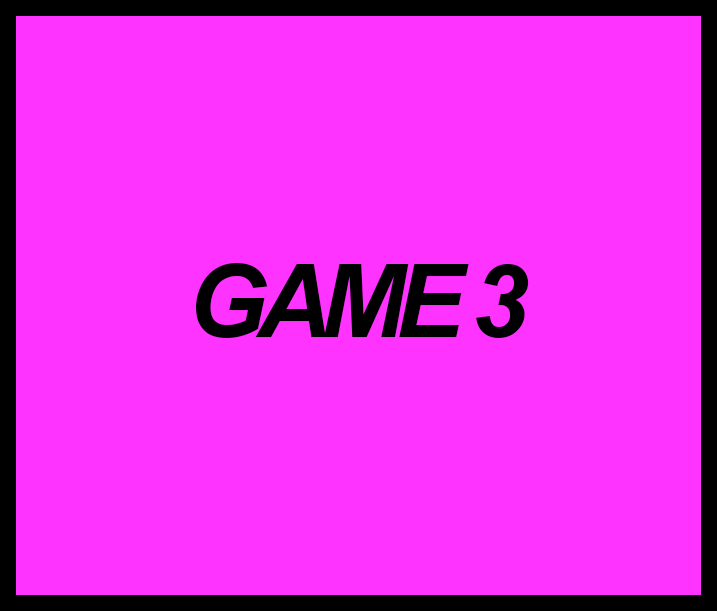
<style>
.page{position:relative;width:717px;height:611px;background:#ff33ff}
.page>*{position:absolute;margin:0}
.t1{font:102px "Arial-BoldItalicMT";letter-spacing:-0.1em;color:#000000}
</style>
<div class="page">
<p class="t1" style="left:196px;top:263px;width:333px;height:75px">GAME 3</p>
</div>
